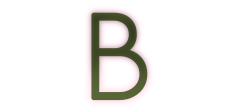
<style>
.page{position:relative;width:229px;height:111px;background:#ffffff}
.page>*{position:absolute;margin:0}
.t1{font:118px "GeosansLight";color:#434d29;font-weight:bold}
</style>
<div class="page">
<p class="t1" style="left:91px;top:12px;width:57px;height:89px">B</p>
</div>
